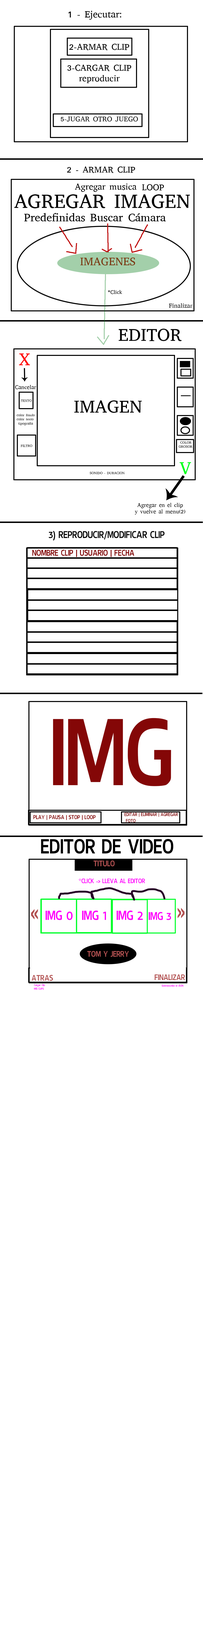
<style>
.page{position:relative;width:203px;height:1626px;background:#ffffff}
.page>*{position:absolute;margin:0}
.t1{font:9.6px "AbyssinicaSIL";color:#000000}
.t2{font:8.7px "AbyssinicaSIL";color:#000000}
.t3{font:7.1px "AbyssinicaSIL";color:#000000}
.t4{font:19.7px "AbyssinicaSIL";color:#000000}
.t5{font:11.2px "AbyssinicaSIL";color:#000000}
.t6{font:11.2px "AbyssinicaSIL";color:#7b3712}
.t7{font:5.3px "AbyssinicaSIL";color:#000000}
.t8{font:6.1px "AbyssinicaSIL";color:#000000}
.t9{font:17.7px "AbyssinicaSIL";color:#000000}
.t10{font:17.7px "AbyssinicaSIL";color:#ff0000}
.t11{font:5.5px "AbyssinicaSIL";color:#000000}
.t12{font:3.5px "AbyssinicaSIL";color:#000000}
.t13{font:11px "Keraleeyam";color:#000000}
.t14{font:9.4px "Keraleeyam";color:#840707}
.t15{font:105.5px "Keraleeyam";color:#840707}
.t16{font:6.3px "Keraleeyam";color:#840707}
.t17{font:5.3px "Keraleeyam";color:#840707}
.t18{font:22.8px "Keraleeyam";color:#000000}
.t19{font:9px "Keraleeyam";color:#b35252}
.t20{font:7.2px "Keraleeyam";color:#ff00fc}
.t21{font:22.8px "Keraleeyam";color:#b35252}
.t22{font:14.7px "Keraleeyam";color:#ff00fc}
.t23{font:12.5px "Keraleeyam";color:#ff00fc}
.t24{font:3.1px "Keraleeyam";color:#ff00fc}
</style>
<div class="page">
<p class="t1" style="left:69px;top:11px;width:53px;height:9px">1 - Ejecutar:</p>
<p class="t2" style="left:61px;top:44px;width:77px;height:78px;text-align:center">2-ARMAR CLIP<br><br>3-CARGAR CLIP<br>reproducir<br><br><br><br><span class="t3">5-JUGAR OTRO JUEGO</span></p>
<p class="t2" style="left:67px;top:167px;width:68px;height:6px">2 - ARMAR CLIP</p>
<p class="t2" style="left:75px;top:184px;width:62px;height:8px">Agregar musica</p>
<p class="t2" style="left:142px;top:184px;width:22px;height:6px">LOOP</p>
<p class="t4" style="left:14px;top:194px;width:176px;height:14px">AGREGAR IMAGEN</p>
<p class="t5" style="left:24px;top:213px;width:142px;height:9px">Predefinidas Buscar Cámara</p>
<p class="t6" style="left:80px;top:258px;width:55px;height:8px">IMAGENES</p>
<p class="t7" style="left:108px;top:290px;width:14px;height:4px">*Click</p>
<p class="t8" style="left:169px;top:303px;width:24px;height:5px">Finalizar</p>
<p class="t9" style="left:119px;top:329px;width:63px;height:12px">EDITOR</p>
<p class="t10" style="left:19px;top:354px;width:11px;height:11px">X</p>
<p class="t11" style="left:15px;top:385px;width:21px;height:4px">Cancelar</p>
<p class="t12" style="left:21px;top:399px;width:11px;height:3px">TEXTO</p>
<p class="t9" style="left:74px;top:400px;width:68px;height:13px">IMAGEN</p>
<p class="t12" style="left:17px;top:414px;width:18px;height:12px">color fondo<br>color texto<br> tipografia</p>
<p class="t12" style="left:21px;top:445px;width:11px;height:2px">FILTRO</p>
<p class="t12" style="left:179px;top:441px;width:14px;height:7px">COLOR<br>GROSOR</p>
<p class="t12" style="left:90px;top:472px;width:35px;height:2px">SONIDO - DURACION</p>
<p class="t11" style="left:135px;top:503px;width:51px;height:12px;text-align:center">Agregar en el clip<br>y vuelve al menu(2)</p>
<p class="t13" style="left:49px;top:531px;width:116px;height:10px">3) REPRODUCIR/MODIFICAR CLIP</p>
<p class="t14" style="left:32px;top:550px;width:102px;height:7px">NOMBRE CLIP | USUARIO | FECHA</p>
<p class="t15" style="left:53px;top:718px;width:118px;height:68px">IMG</p>
<p class="t16" style="left:33px;top:815px;width:63px;height:5px">PLAY | PAUSA | STOP | LOOP</p>
<p class="t17" style="left:125px;top:813px;width:53px;height:10px">EDITAR | ELIMINAR | AGREGAR<br> FOTO</p>
<p class="t18" style="left:41px;top:839px;width:133px;height:15px">EDITOR DE VIDEO</p>
<p class="t19" style="left:94px;top:861px;width:21px;height:6px">TITULO</p>
<p class="t20" style="left:79px;top:879px;width:66px;height:5px">*CLICK -&gt; LLEVA AL EDITOR</p>
<p class="t21" style="left:31px;top:909px;width:7px;height:11px">«</p>
<p class="t22" style="left:46px;top:911px;width:27px;height:9px">IMG 0</p>
<p class="t22" style="left:82px;top:911px;width:24px;height:9px">IMG 1</p>
<p class="t22" style="left:117px;top:911px;width:26px;height:9px">IMG 2</p>
<p class="t23" style="left:149px;top:912px;width:22px;height:8px">IMG 3</p>
<p class="t21" style="left:178px;top:908px;width:7px;height:11px">»</p>
<p class="t19" style="left:87px;top:951px;width:42px;height:6px">TOM Y JERRY</p>
<p class="t19" style="left:32px;top:975px;width:21px;height:6px">ATRAS</p>
<p class="t19" style="left:155px;top:975px;width:30px;height:5px">FINALIZAR</p>
<p class="t24" style="left:34px;top:984px;width:11px;height:6px">Cargar Clip<br>MIS CLIPS</p>
<p class="t24" style="left:162px;top:985px;width:22px;height:2px">Sobreescribe el JSON</p>
</div>
